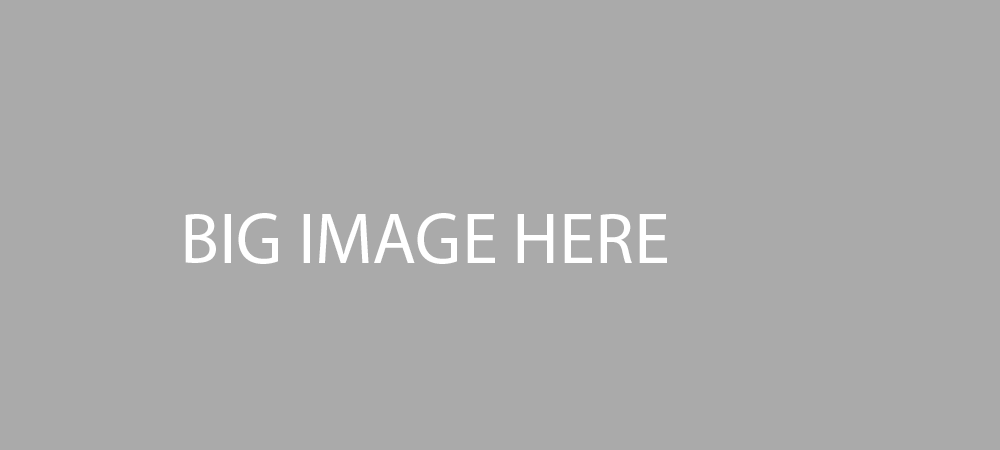
<style>
.page{position:relative;width:1000px;height:450px;background:#aaaaaa}
.page>*{position:absolute;margin:0}
.t1{font:72px "MyriadPro-Regular";color:#ffffff}
</style>
<div class="page">
<p class="t1" style="left:185px;top:213px;width:482px;height:51px">BIG IMAGE HERE</p>
</div>
